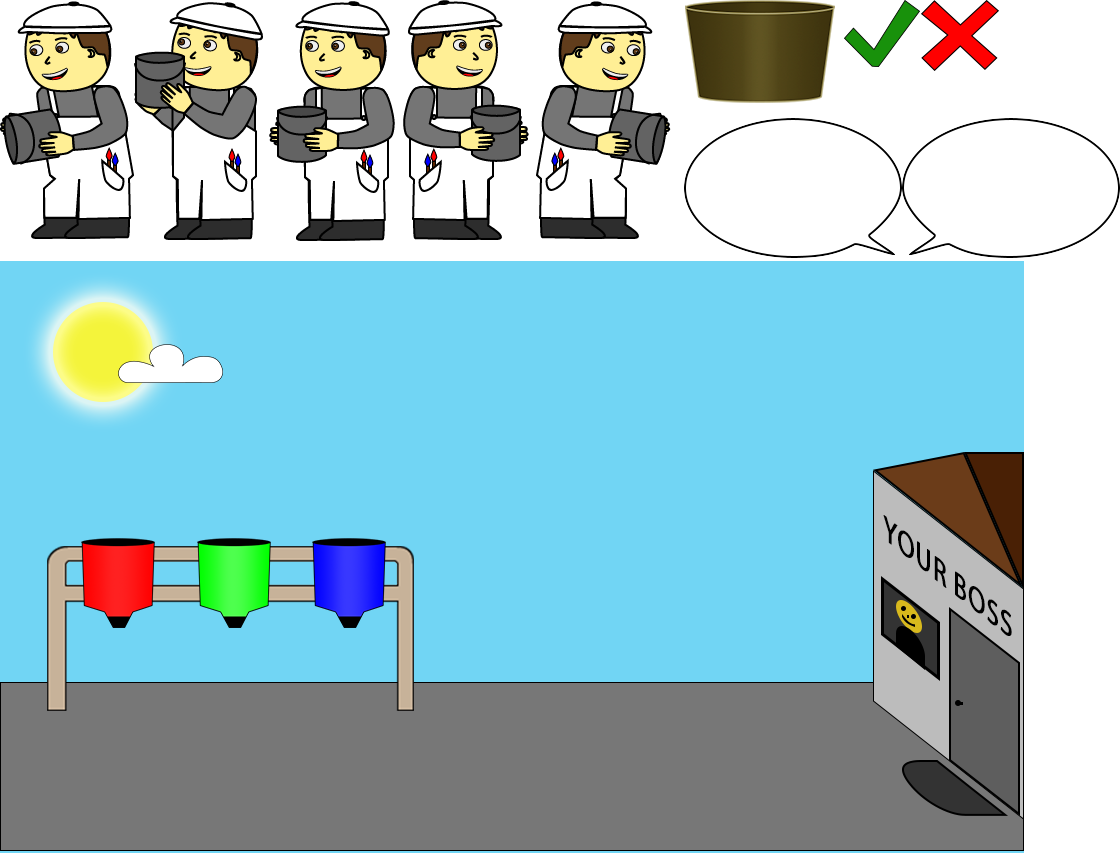
<style>
.page{position:relative;width:1120px;height:853px;background:#71d5f4}
.page>*{position:absolute;margin:0}
.t1{font:34.7px "MyriadPro-Regular";letter-spacing:0.01em;color:#000000;font-weight:bold;scale:0.92 1}
</style>
<div class="page">
<p class="t1" style="left:883px;top:515px;width:129px;height:121px;rotate:38deg">YOUR BOSS</p>
</div>
